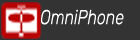
<style>
.page{position:relative;width:140px;height:40px;background:#333333}
.page>*{position:absolute;margin:0}
.t1{font:20.3px "Rubik-LightItalic";color:#ffffff;scale:0.78 1}
</style>
<div class="page">
<p class="t1" style="left:41px;top:9px;width:83px;height:16px">OmniPhone</p>
</div>
